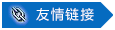
<style>
.page{position:relative;width:115px;height:30px;background:#056bc0}
.page>*{position:absolute;margin:0}
.t1{font:13.3px "MicrosoftYaHei";letter-spacing:0.11em;color:#ffffff}
</style>
<div class="page">
<p class="t1" style="left:36px;top:7px;width:58px;height:14px">友情链接</p>
</div>
